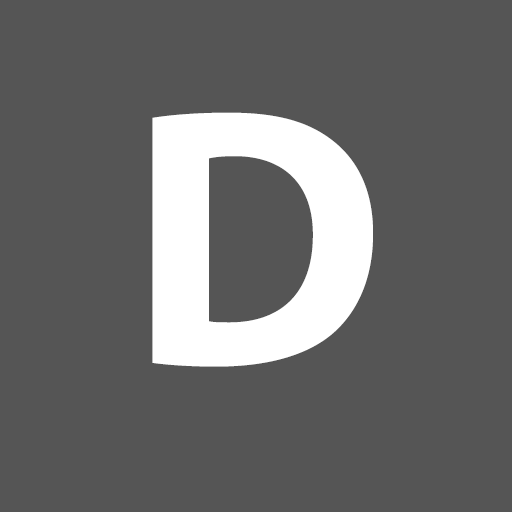
<style>
.page{position:relative;width:512px;height:512px;background:#555555}
.page>*{position:absolute;margin:0}
.t1{font:370px "MyriadPro-Bold";color:#ffffff}
</style>
<div class="page">
<p class="t1" style="left:152px;top:112px;width:221px;height:255px">D</p>
</div>
